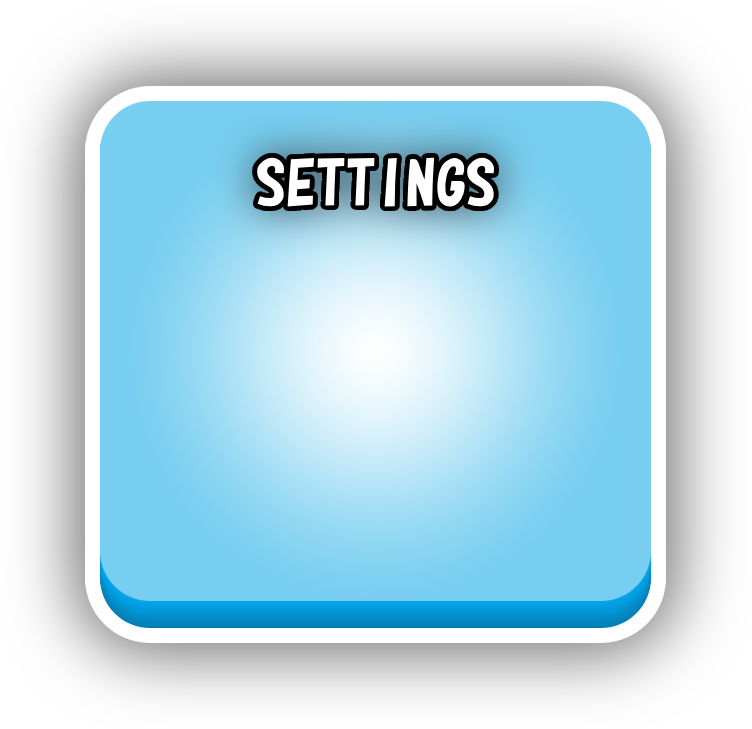
<style>
.page{position:relative;width:752px;height:729px}
.page>*{position:absolute;margin:0}
.t1{font:60px "HGPSoeiKakupoptai";color:#ffffff}
</style>
<div class="page">
<p class="t1" style="left:257px;top:156px;width:238px;height:52px">SETTINGS</p>
</div>
